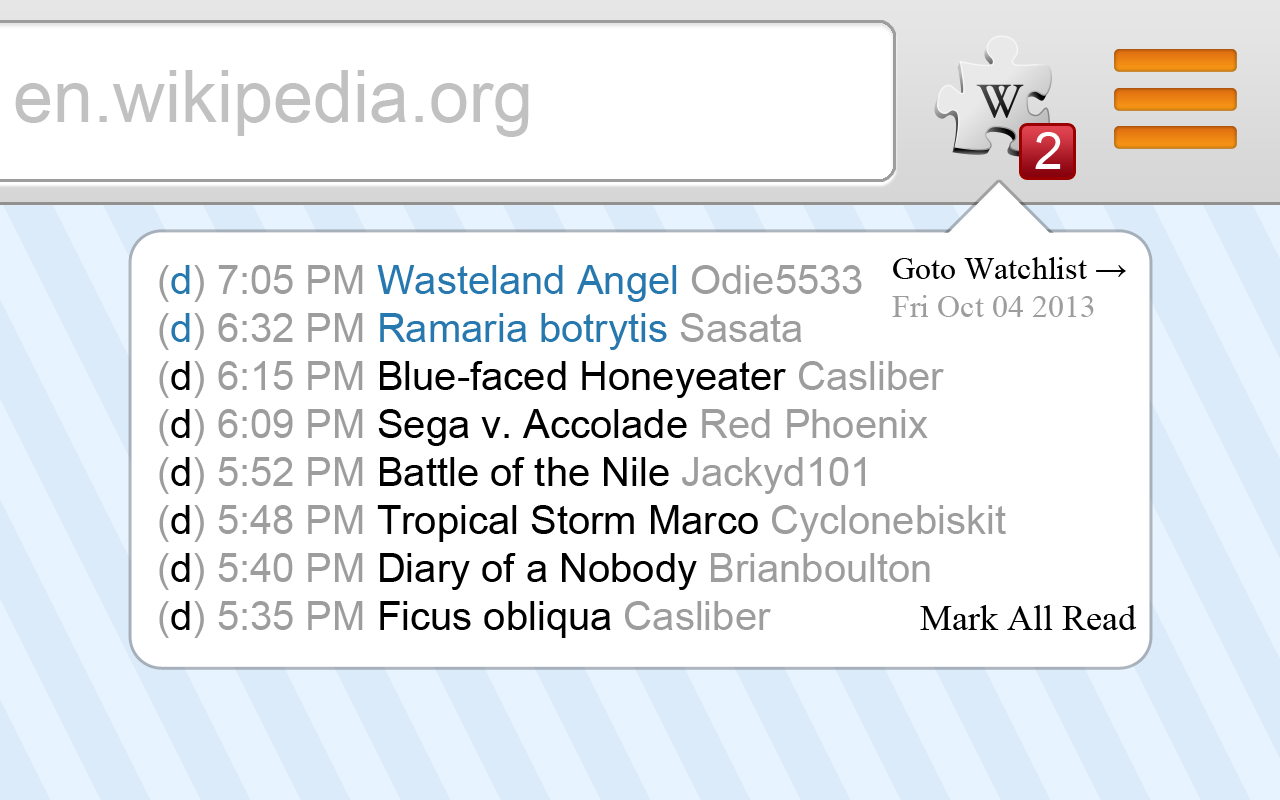
<style>
.page{position:relative;width:1280px;height:800px;background:#ffffff}
.page>*{position:absolute;margin:0}
.t1{font:72px "ArialMT";color:#c1c1c1}
.t2{font:52px "ArialMT";color:#ffffff}
.t3{font:32px "TimesNewRomanPSMT";color:#000000}
.t4{font:32px "TimesNewRomanPSMT";color:#9d9d9d}
.t5{font:40px "ArialMT";color:#000000}
.t6{font:40px "ArialMT";color:#9d9d9d}
.t7{font:40px "ArialMT";color:#2778ae}
.t8{font:40px "ArialMT";color:#010101}
.t9{font:36px "TimesNewRomanPSMT";color:#000000}
</style>
<div class="page">
<p class="t1" style="left:15px;top:70px;width:514px;height:67px">en.wikipedia.org</p>
<p class="t2" style="left:1035px;top:132px;width:26px;height:37px">2</p>
<p class="t3" style="left:892px;top:257px;width:234px;height:60px">Goto Watchlist →<br><span class="t4">Fri Oct 04 2013</span></p>
<p class="t5" style="left:159px;top:265px;width:847px;height:373px"><span class="t6">(</span><span class="t7">d</span><span class="t6">) 7:05 PM </span><span class="t7">Wasteland Angel </span><span class="t6">Odie5533<br>(</span><span class="t7">d</span><span class="t6">) 6:32 PM </span><span class="t7">Ramaria botrytis </span><span class="t6">Sasata<br>(</span>d<span class="t6">) 6:15 PM </span>Blue-faced Honeyeater <span class="t6">Casliber<br>(</span>d<span class="t6">) 6:09 PM </span>Sega v. Accolade <span class="t6">Red Phoenix<br>(</span>d<span class="t6">) 5:52 PM </span>Battle of the Nile <span class="t6">Jackyd101<br>(</span>d<span class="t6">) 5:48 PM </span>Tropical Storm Marco <span class="t6">Cyclonebiskit<br>(</span><span class="t8">d</span><span class="t6">) 5:40 PM </span>Diary of a Nobody <span class="t6">Brianboulton<br>(</span>d<span class="t6">) 5:35 PM </span>Ficus obliqua <span class="t6">Casliber</span></p>
<p class="t9" style="left:920px;top:605px;width:217px;height:25px">Mark All Read</p>
</div>
